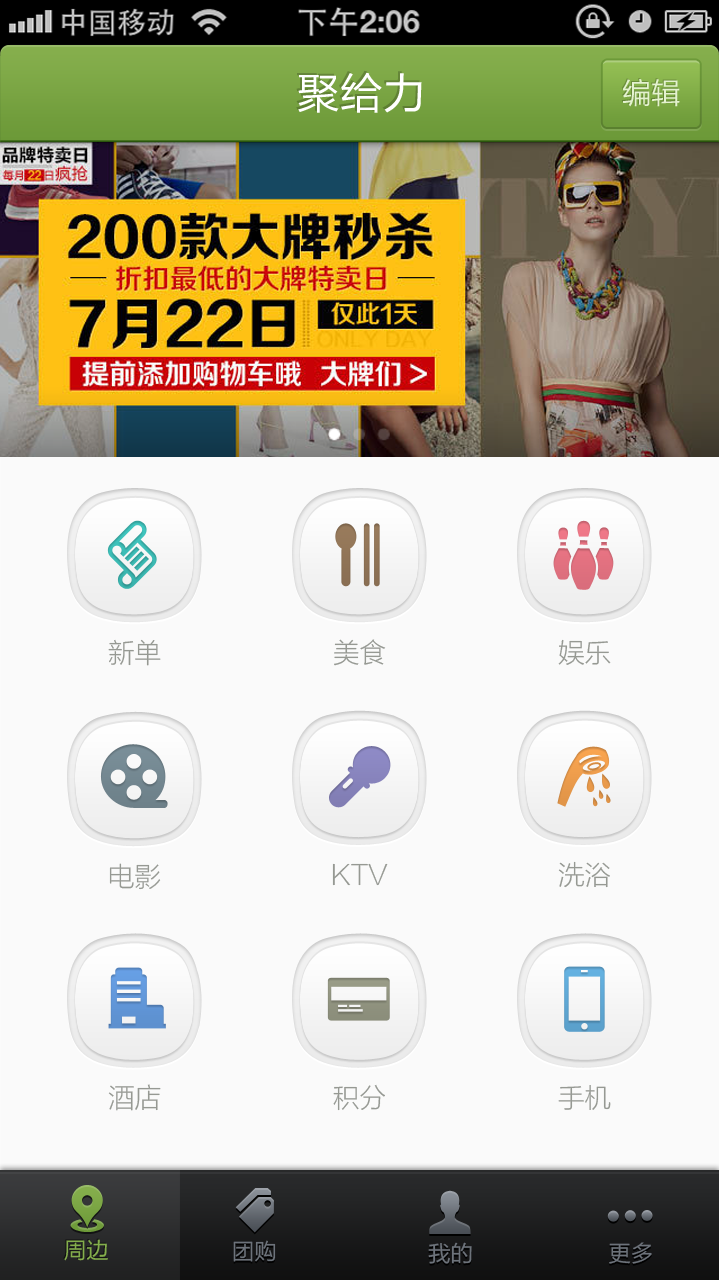
<style>
.page{position:relative;width:719px;height:1280px;background:#fafafa}
.page>*{position:absolute;margin:0}
.t1{font:42.7px "FZLTHJW--GB1-0";color:#ffffff}
.t2{font:29.2px "FZLTHJW--GB1-0";color:#dddddd}
.t3{font:27px "FZLTXHJW--GB1-0";color:#969993}
.t4{font:22.5px "FZLTHJW--GB1-0";color:#84ae4c}
.t5{font:22.5px "FZLTHJW--GB1-0";color:#6d737b}
</style>
<div class="page">
<p class="t1" style="left:298px;top:72px;width:124px;height:41px">聚给力</p>
<p class="t2" style="left:622px;top:79px;width:58px;height:28px">编辑</p>
<p class="t3" style="left:108px;top:639px;width:53px;height:27px">新单</p>
<p class="t3" style="left:334px;top:639px;width:52px;height:27px">美食</p>
<p class="t3" style="left:558px;top:639px;width:53px;height:26px">娱乐</p>
<p class="t3" style="left:109px;top:863px;width:52px;height:27px">电影</p>
<p class="t3" style="left:332px;top:863px;width:56px;height:23px">KTV</p>
<p class="t3" style="left:558px;top:861px;width:52px;height:27px">洗浴</p>
<p class="t3" style="left:108px;top:1084px;width:53px;height:27px">酒店</p>
<p class="t3" style="left:333px;top:1084px;width:52px;height:27px">积分</p>
<p class="t3" style="left:558px;top:1085px;width:53px;height:25px">手机</p>
<p class="t4" style="left:64px;top:1239px;width:44px;height:22px">周边</p>
<p class="t5" style="left:233px;top:1240px;width:43px;height:22px">团购</p>
<p class="t5" style="left:428px;top:1242px;width:44px;height:22px">我的</p>
<p class="t5" style="left:609px;top:1242px;width:43px;height:22px">更多</p>
</div>
